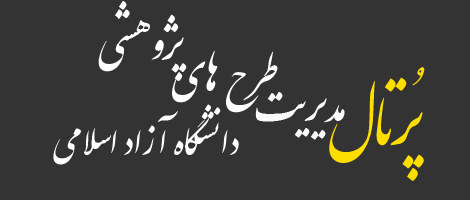
<style>
.page{position:relative;width:470px;height:200px;background:#333333}
.page>*{position:absolute;margin:0}
.t1{font:48px "IranNastaliq";color:#ffffff}
.t2{font:48px "IranNastaliq";color:#000000}
.t3{font:70px "IranNastaliq";color:#fedd00}
.t4{font:48px "IranNastaliq";color:#fbfafa}
.t5{font:40px "IranNastaliq";color:#ffffff}
</style>
<div class="page">
<p class="t1" style="left:98px;top:1px;width:89px;height:80px"><span class="t2"> </span>پژوهشي</p>
<p class="t1" style="left:172px;top:50px;width:106px;height:63px">طرح هاي</p>
<p class="t3" style="left:329px;top:67px;width:96px;height:114px">پُرتـال</p>
<p class="t4" style="left:255px;top:91px;width:90px;height:49px">مديريت</p>
<p class="t5" style="left:53px;top:104px;width:186px;height:61px">دانشگاه آزاد اسلامي</p>
</div>
